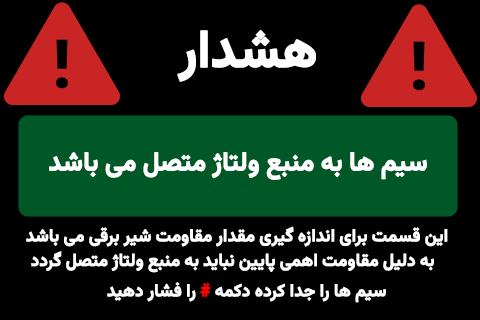
<style>
.page{position:relative;width:480px;height:320px;background:#000000}
.page>*{position:absolute;margin:0}
.t1{font:52.6px "Vazirmatn-Bold";letter-spacing:-0.01em;color:#ffffff;font-weight:bold;scale:0.94 1}
.t2{font:26.5px "Vazirmatn-Bold";letter-spacing:-0.01em;color:#ffffff;font-weight:bold;scale:0.94 1}
.t3{font:17.7px "Vazirmatn-Bold";letter-spacing:-0.01em;color:#ffffff;font-weight:bold;scale:0.94 1}
.t4{font:17.7px "Vazirmatn-Bold";letter-spacing:-0.01em;color:#ff0000;font-weight:bold;scale:0.94 1}
</style>
<div class="page">
<p class="t1" style="left:177px;top:30px;width:139px;height:52px">هشدار</p>
<p class="t2" style="left:49px;top:152px;width:378px;height:28px">سیم ها به منبع ولتاژ متصل می باشد</p>
<p class="t3" style="left:26px;top:226px;width:422px;height:21px">این قسمت برای اندازه گیری مقدار مقاومت شیر برقی می باشد</p>
<p class="t3" style="left:31px;top:251px;width:403px;height:22px">به دلیل مقاومت اهمی پایین نباید به منبع ولتاژ متصل گردد</p>
<p class="t3" style="left:107px;top:282px;width:279px;height:21px">سیم ها را جدا کرده دکمه <span class="t4">#</span> را فشار دهید</p>
</div>
